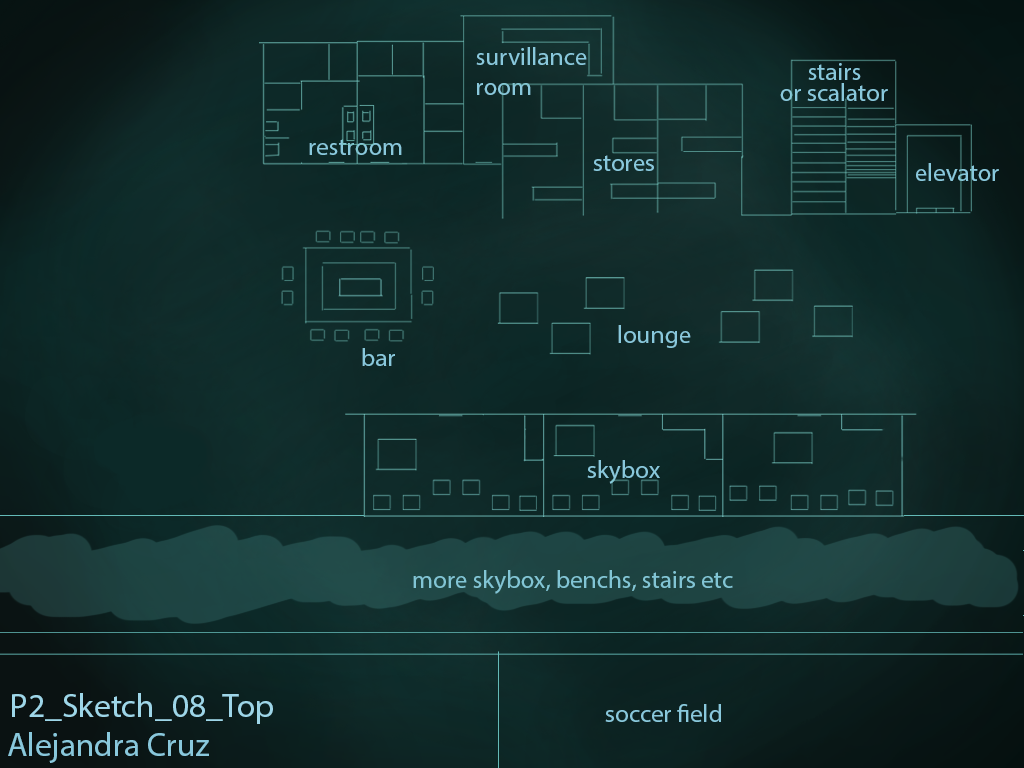
<style>
.page{position:relative;width:1024px;height:768px}
.page>*{position:absolute;margin:0}
.t1{font:25px "MyriadPro-Regular";color:#89c8dc}
.t2{font:33.3px "MyriadPro-Regular";color:#9ed6e8}
.t3{font:33.3px "MyriadPro-Regular";color:#89c8dc}
</style>
<div class="page">
<p class="t1" style="left:476px;top:47px;width:111px;height:48px">survillance<br>room</p>
<p class="t1" style="left:808px;top:63px;width:53px;height:17px">stairs</p>
<p class="t1" style="left:780px;top:83px;width:108px;height:18px">or scalator</p>
<p class="t1" style="left:309px;top:139px;width:93px;height:16px">restroom</p>
<p class="t1" style="left:593px;top:155px;width:61px;height:16px">stores</p>
<p class="t1" style="left:916px;top:163px;width:83px;height:18px">elevator</p>
<p class="t1" style="left:618px;top:325px;width:73px;height:23px">lounge</p>
<p class="t1" style="left:362px;top:348px;width:33px;height:18px">bar</p>
<p class="t1" style="left:587px;top:460px;width:73px;height:24px">skybox</p>
<p class="t1" style="left:413px;top:570px;width:320px;height:24px">more skybox, benchs, stairs etc</p>
<p class="t2" style="left:12px;top:693px;width:261px;height:31px">P2_Sketch_08_Top</p>
<p class="t1" style="left:605px;top:704px;width:116px;height:18px">soccer field</p>
<p class="t3" style="left:8px;top:732px;width:201px;height:31px">Alejandra Cruz</p>
</div>
